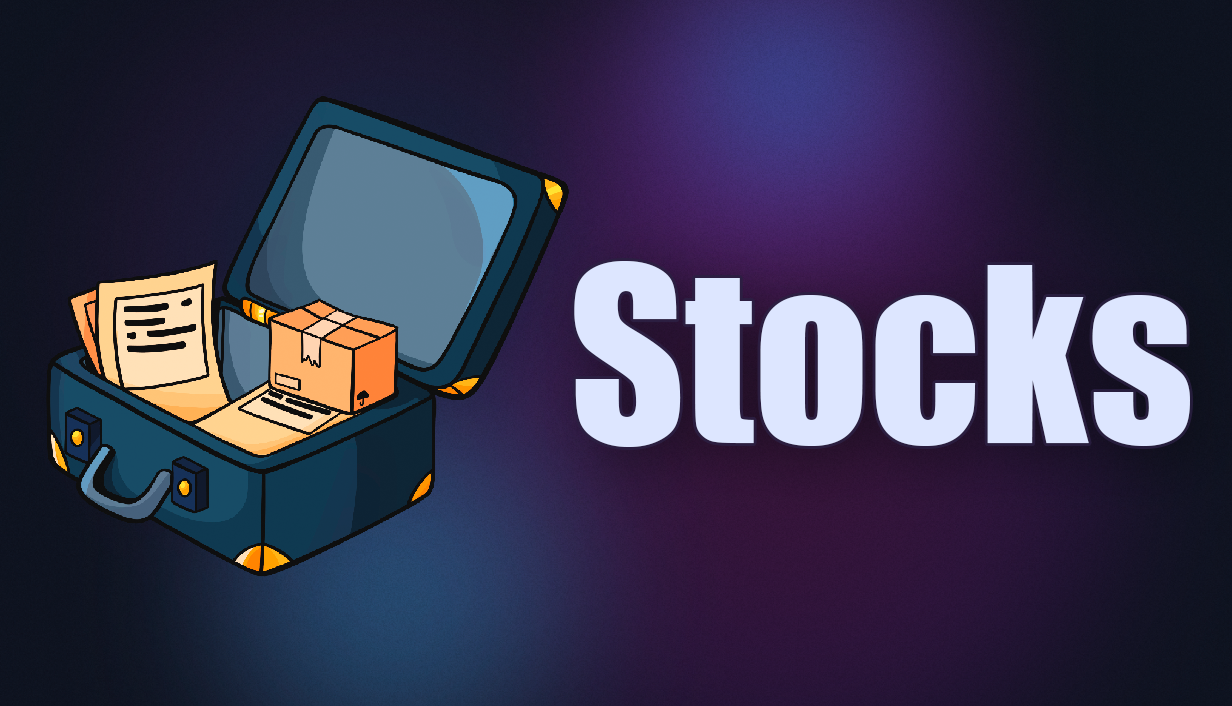
<style>
.page{position:relative;width:1232px;height:706px}
.page>*{position:absolute;margin:0}
.t1{font:225px "Impact";color:#dde6ff}
</style>
<div class="page">
<p class="t1" style="left:574px;top:261px;width:616px;height:186px">Stocks</p>
</div>
